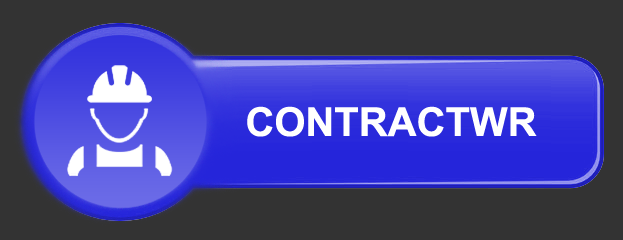
<style>
.page{position:relative;width:623px;height:240px;background:#333333}
.page>*{position:absolute;margin:0}
.t1{font:40px "Arial-BoldMT";color:#ffffff}
</style>
<div class="page">
<p class="t1" style="left:247px;top:106px;width:290px;height:31px">CONTRACTWR</p>
</div>
